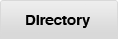
<style>
.page{position:relative;width:118px;height:39px;background:#d9d9d9}
.page>*{position:absolute;margin:0}
.t1{font:14px "Helvetica-Bold";color:#000000;scale:1.06 1}
</style>
<div class="page">
<p class="t1" style="left:26px;top:15px;width:64px;height:13px">Directory</p>
</div>
